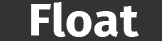
<style>
.page{position:relative;width:162px;height:41px;background:#333333}
.page>*{position:absolute;margin:0}
.t1{font:45.6px "FiraSans-Bold";color:#ffffff;scale:1.05 1}
</style>
<div class="page">
<p class="t1" style="left:31px;top:2px;width:108px;height:35px">Float</p>
</div>
